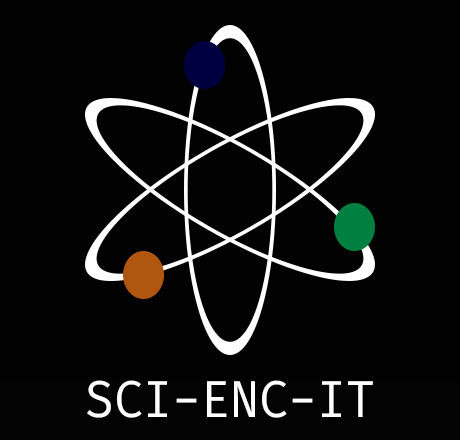
<style>
.page{position:relative;width:460px;height:440px;background:#020202}
.page>*{position:absolute;margin:0}
.t1{font:52px "FiraCode-Regular";color:#ffffff;scale:0.93 1}
</style>
<div class="page">
<p class="t1" style="left:87px;top:380px;width:286px;height:38px">SCI-ENC-IT</p>
</div>
